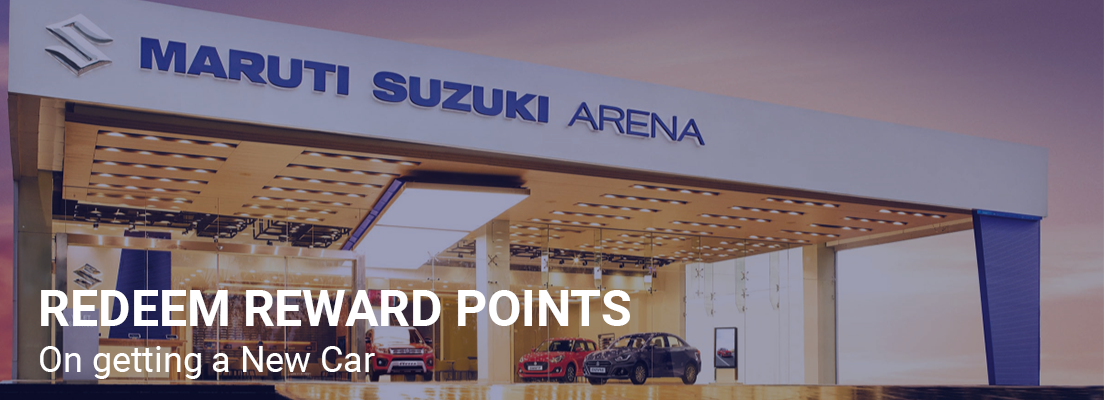
<style>
.page{position:relative;width:1104px;height:400px}
.page>*{position:absolute;margin:0}
.t1{font:49.8px "Roboto-Bold";color:#ffffff}
.t2{font:35.8px "Roboto-Regular";color:#ffffff}
</style>
<div class="page">
<p class="t1" style="left:41px;top:290px;width:589px;height:36px">REDEEM REWARD POINTS</p>
<p class="t2" style="left:40px;top:346px;width:335px;height:33px">On getting a New Car</p>
</div>
